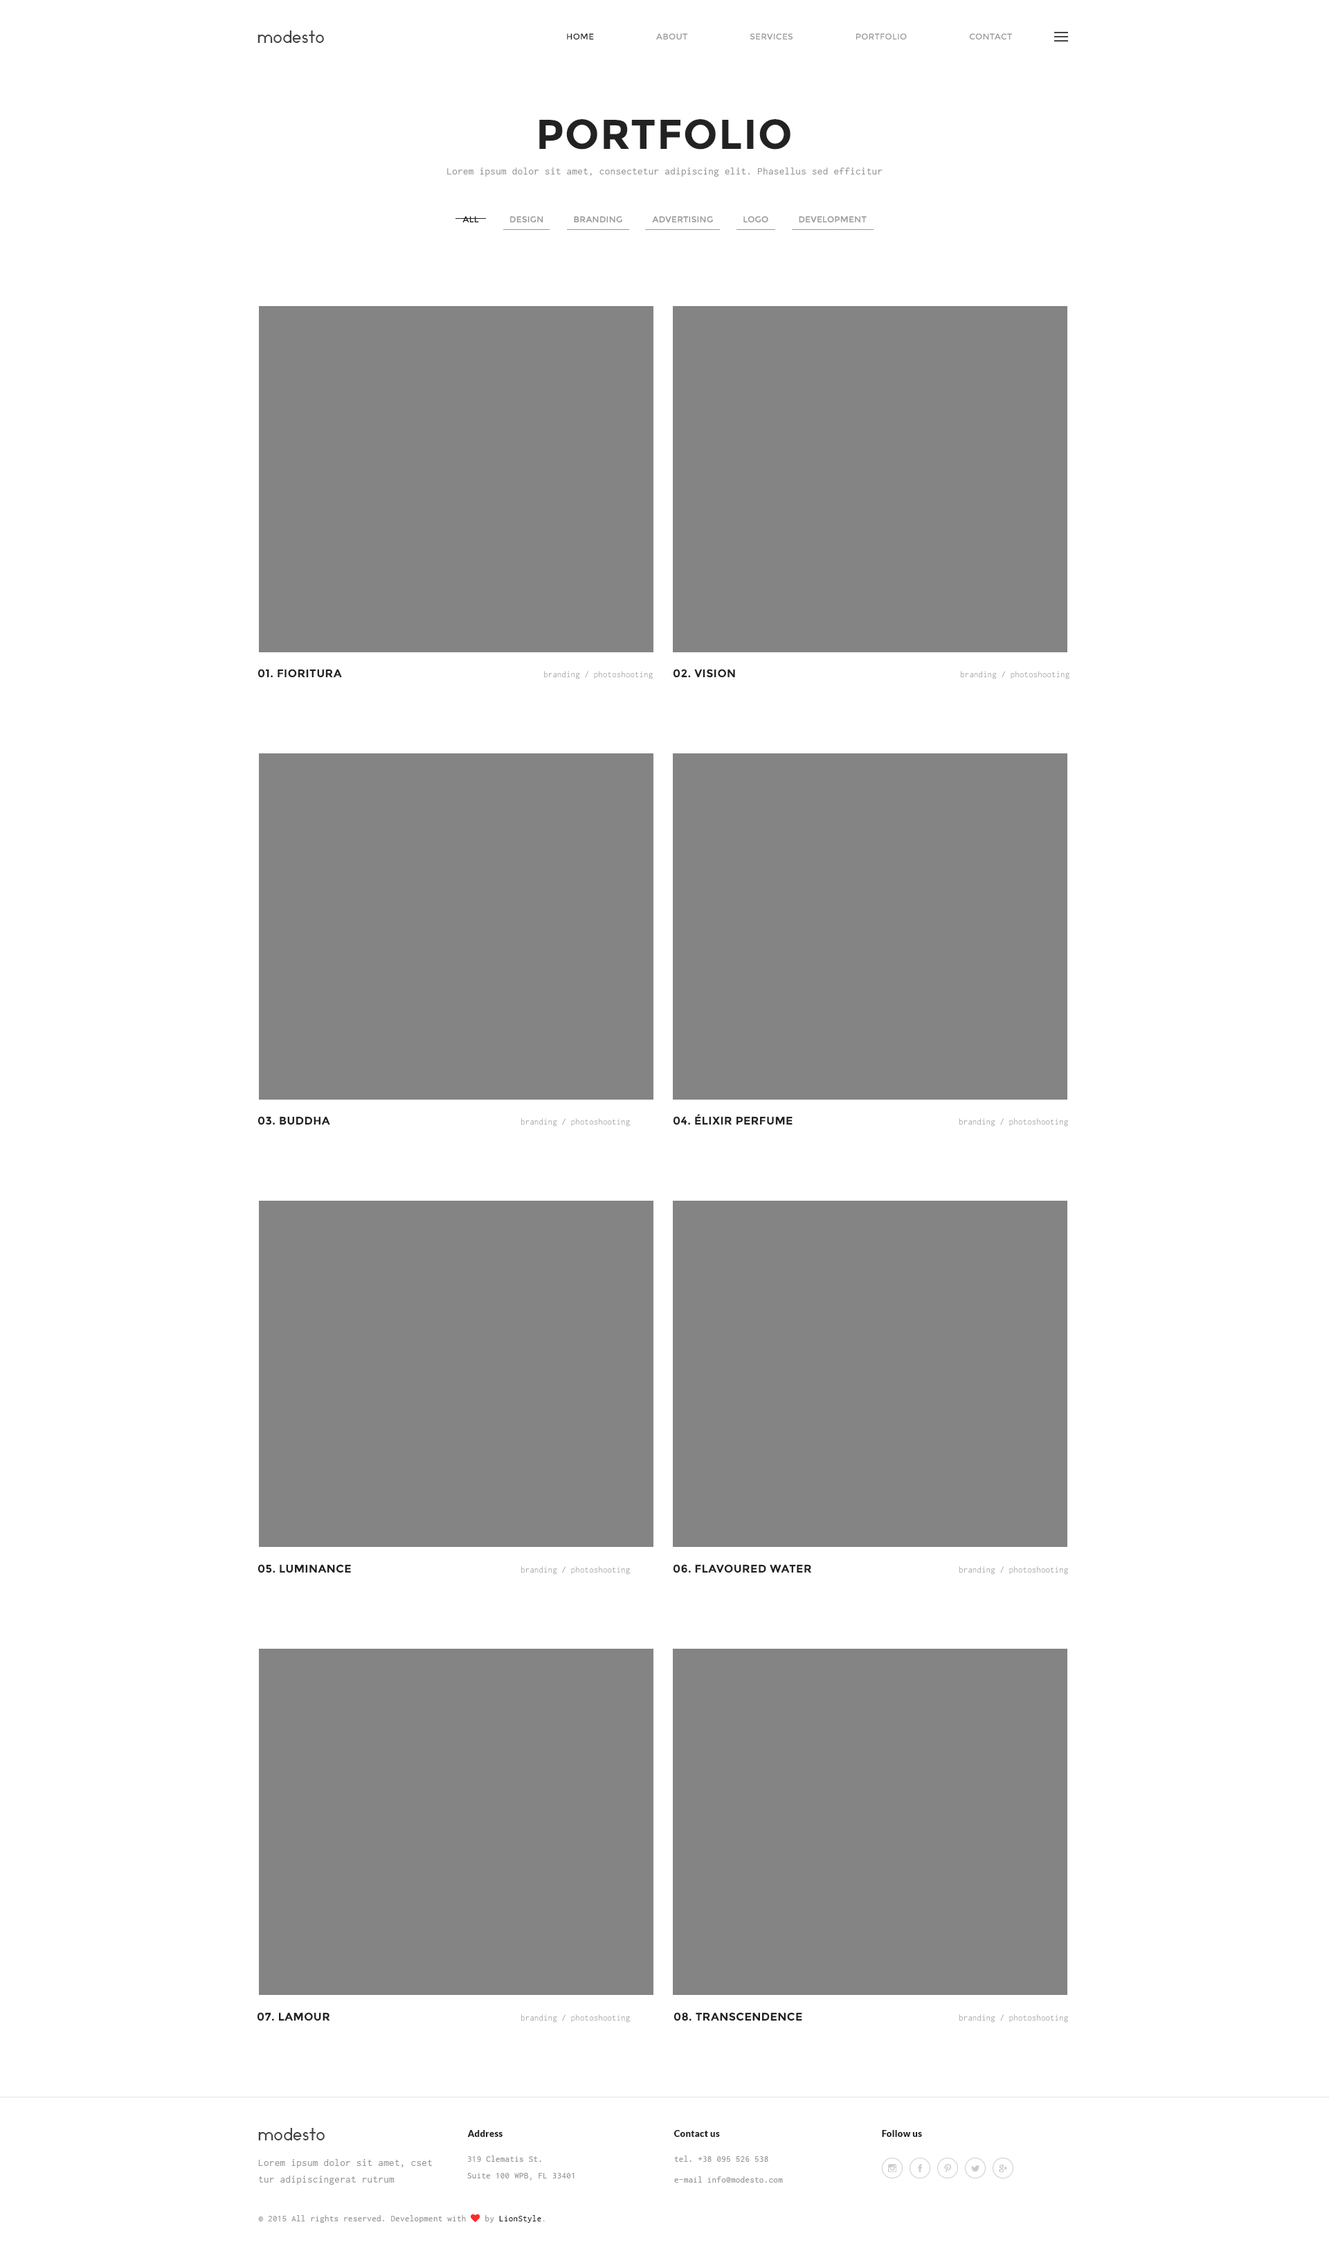
<style>
.page{position:relative;width:1329px;height:2256px;background:#ffffff}
.page>*{position:absolute;margin:0}
.t1{font:16.6px "Ikaros";letter-spacing:0.025em;color:#444444}
.t2{font:8.3px "Montserrat-Regular";letter-spacing:0.025em;color:#989898;text-transform:uppercase}
.t3{font:8.3px "Montserrat-Regular";letter-spacing:0.025em;color:#222222;text-transform:uppercase}
.t4{font:41.5px "Montserrat-Bold";letter-spacing:0.025em;color:#222222;text-transform:uppercase}
.t5{font:10.4px "Inconsolata";letter-spacing:0.025em;color:#989898}
.t6{font:11.1px "Montserrat-Bold";letter-spacing:0.025em;color:#222222;text-transform:uppercase}
.t7{font:9px "Inconsolata";letter-spacing:0.025em;color:#989898;scale:0.97 1}
.t8{font:9px "Lato-Black";letter-spacing:0.025em;color:#222222}
.t9{font:10.4px/16.6px "Inconsolata";letter-spacing:0.025em;color:#989898}
.t10{font:9px/16.6px "Inconsolata";letter-spacing:0.025em;color:#989898}
.t11{font:9px/20.8px "Inconsolata";letter-spacing:0.025em;color:#989898}
.t12{font:9px "Inconsolata";letter-spacing:0.025em;color:#989898}
.t13{font:9px "FontAwesome";letter-spacing:0.025em;color:#fe2b2b}
.t14{font:9px "Inconsolata";letter-spacing:0.025em;color:#222222}
.t15{font:9px "Inconsolata";letter-spacing:0.025em;color:#b5b5b5}
</style>
<div class="page">
<p class="t1" style="left:258px;top:30px;width:66px;height:13px">modesto</p>
<p class="t2" style="left:567px;top:33px;width:445px;height:6px"><span class="t3">home                         </span>about                         services                         portfolio                         contact</p>
<p class="t4" style="left:539px;top:119px;width:252px;height:31px">portfolio</p>
<p class="t5" style="left:447px;top:168px;width:436px;height:9px">Lorem ipsum dolor sit amet, consectetur adipiscing elit. Phasellus sed efficitur</p>
<p class="t3" style="left:462px;top:216px;width:17px;height:7px">all</p>
<p class="t2" style="left:510px;top:216px;width:357px;height:7px">design            branding            advertising            logo            development</p>
<p class="t6" style="left:258px;top:669px;width:84px;height:9px">01. Fioritura</p>
<p class="t7" style="left:544px;top:671px;width:109px;height:8px">branding / photoshooting</p>
<p class="t6" style="left:674px;top:669px;width:61px;height:9px">02. Vision</p>
<p class="t7" style="left:961px;top:671px;width:109px;height:8px">branding / photoshooting</p>
<p class="t6" style="left:258px;top:1116px;width:72px;height:9px">03. Buddha</p>
<p class="t7" style="left:521px;top:1118px;width:109px;height:8px">branding / photoshooting</p>
<p class="t6" style="left:674px;top:1113px;width:119px;height:12px">04. Élixir Perfume</p>
<p class="t7" style="left:960px;top:1118px;width:108px;height:8px">branding / photoshooting</p>
<p class="t6" style="left:258px;top:1564px;width:93px;height:9px">05. Luminance</p>
<p class="t7" style="left:521px;top:1566px;width:109px;height:8px">branding / photoshooting</p>
<p class="t6" style="left:674px;top:1564px;width:138px;height:9px">06. Flavoured water</p>
<p class="t7" style="left:960px;top:1566px;width:108px;height:8px">branding / photoshooting</p>
<p class="t6" style="left:258px;top:2012px;width:72px;height:9px">07. lamour</p>
<p class="t7" style="left:521px;top:2014px;width:109px;height:8px">branding / photoshooting</p>
<p class="t6" style="left:674px;top:2012px;width:128px;height:9px">08. Transcendence</p>
<p class="t7" style="left:960px;top:2014px;width:108px;height:8px">branding / photoshooting</p>
<p class="t1" style="left:258px;top:2127px;width:67px;height:13px">modesto</p>
<p class="t8" style="left:467px;top:2130px;width:36px;height:6px">Address</p>
<p class="t8" style="left:674px;top:2130px;width:46px;height:6px">Contact us</p>
<p class="t8" style="left:882px;top:2130px;width:40px;height:6px">Follow us</p>
<p class="t9" style="left:258px;top:2159px;width:175px;height:25px">Lorem ipsum dolor sit amet, cset tur adipiscingerat rutrum</p>
<p class="t10" style="left:467px;top:2155px;width:108px;height:25px">319 Clematis St.<br>Suite 100 WPB, FL 33401</p>
<p class="t11" style="left:674px;top:2155px;width:109px;height:27px">tel. +38 095 526 538<br>e-mail info@modesto.com</p>
<p class="t12" style="left:258px;top:2213px;width:287px;height:9px">© 2015 All rights reserved. Development with <span class="t13">♥ </span>by<span class="t14"> LionStyle</span><span class="t15">.</span></p>
</div>
